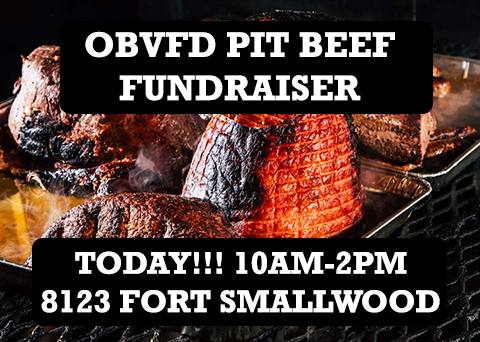
<style>
.page{position:relative;width:480px;height:342px;background:#000000}
.page>*{position:absolute;margin:0}
.t1{font:36px "Rockwell-Bold";color:#ffffff}
.t2{font:32px "Rockwell-Bold";color:#ffffff}
</style>
<div class="page">
<p class="t1" style="left:85px;top:31px;width:310px;height:70px;text-align:center">OBVFD PIT BEEF <br>FUNDRAISER</p>
<p class="t2" style="left:41px;top:251px;width:399px;height:62px;text-align:center">TODAY!!! 10AM-2PM<br>8123 FORT SMALLWOOD</p>
</div>
